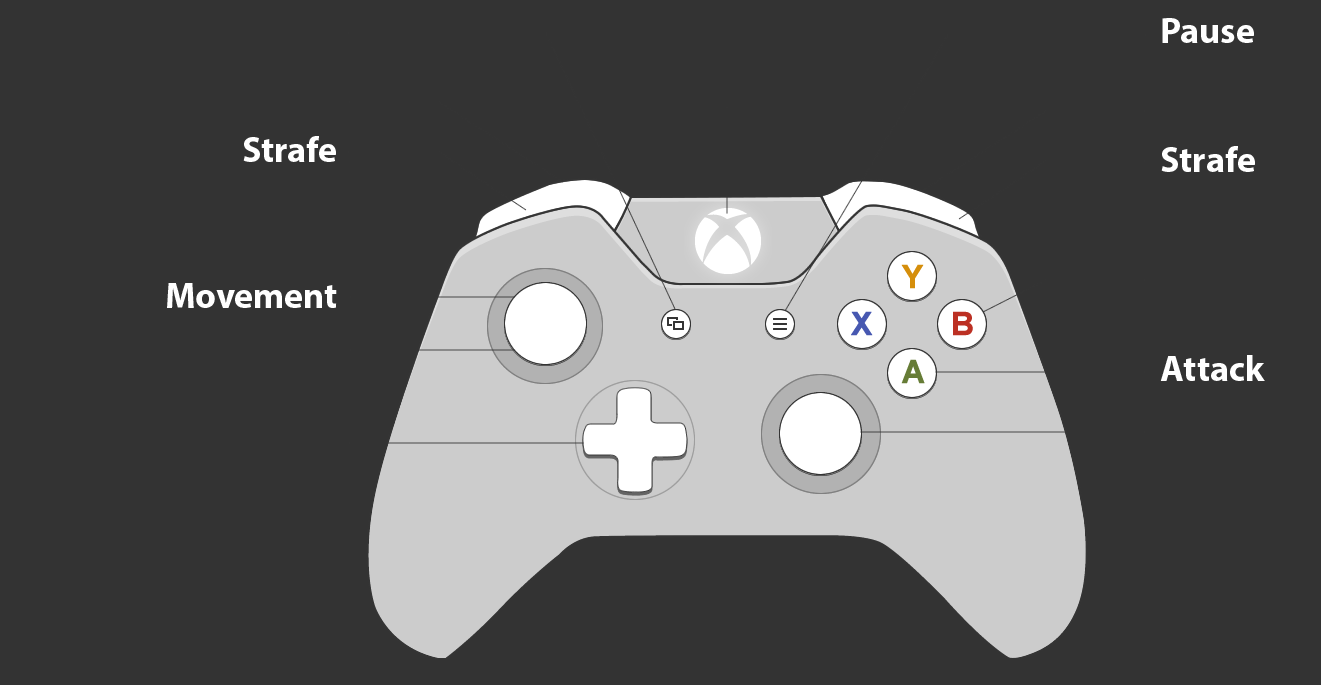
<style>
.page{position:relative;width:1321px;height:685px;background:#333333}
.page>*{position:absolute;margin:0}
.t1{font:36px "MyriadPro-Bold";color:#ffffff}
</style>
<div class="page">
<p class="t1" style="left:1162px;top:18px;width:92px;height:25px">Pause</p>
<p class="t1" style="left:243px;top:136px;width:93px;height:26px">Strafe</p>
<p class="t1" style="left:1161px;top:146px;width:94px;height:26px">Strafe</p>
<p class="t1" style="left:167px;top:283px;width:170px;height:25px">Movement</p>
<p class="t1" style="left:1160px;top:355px;width:105px;height:26px">Attack</p>
</div>
